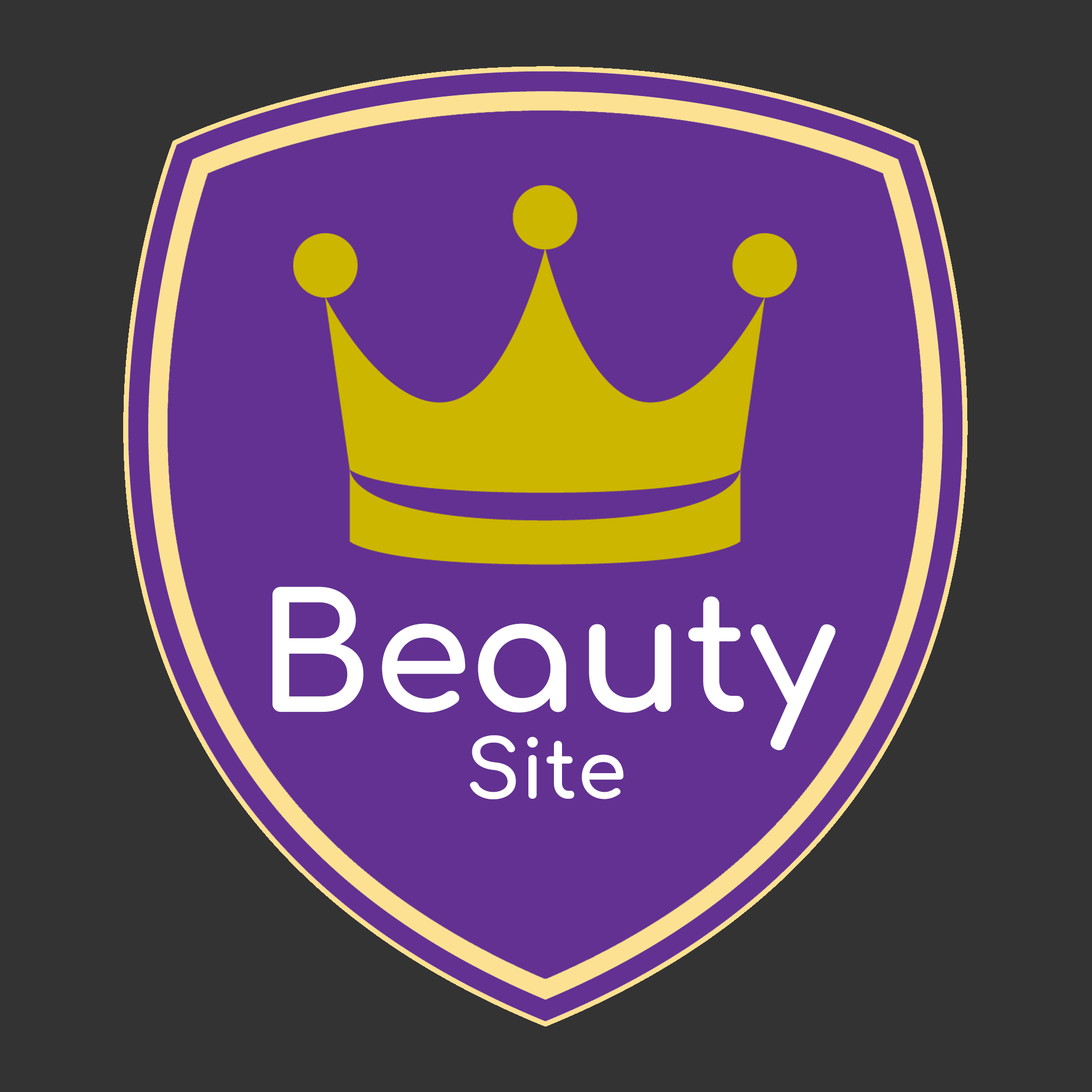
<style>
.page{position:relative;width:1092px;height:1092px;background:#333333}
.page>*{position:absolute;margin:0}
.t1{font:160px "Comfortaa-Bold";color:#ffffff}
.t2{font:80px "Comfortaa-Bold";color:#ffffff}
</style>
<div class="page">
<p class="t1" style="left:272px;top:587px;width:564px;height:163px">Beauty</p>
<p class="t2" style="left:470px;top:735px;width:154px;height:64px">Site</p>
</div>
